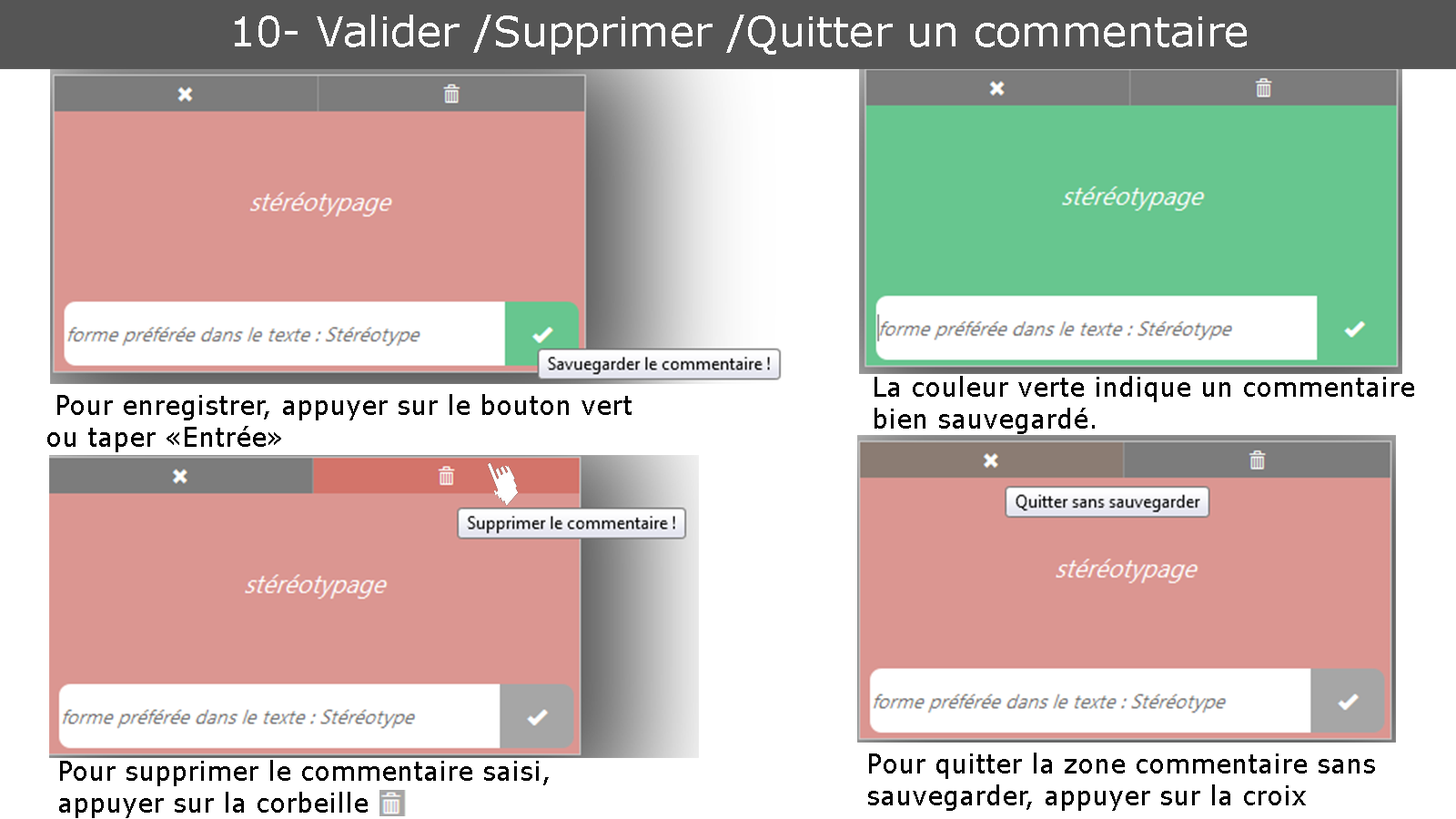
<style>
.page{position:relative;width:1456px;height:819px;background:#ffffff}
.page>*{position:absolute;margin:0}
.t1{font:41.7px "Verdana";color:#ffffff}
.t2{font:26.5px "Verdana";color:#000000}
</style>
<div class="page">
<p class="t1" style="left:235px;top:15px;width:1012px;height:40px">10- Valider /Supprimer /Quitter un commentaire</p>
<p class="t2" style="left:874px;top:376px;width:540px;height:58px">La couleur verte indique un commentaire bien sauvegardé.</p>
<p class="t2" style="left:47px;top:394px;width:585px;height:58px">Pour enregistrer, appuyer sur le bouton vert ou taper «Entrée»</p>
<p class="t2" style="left:59px;top:760px;width:490px;height:58px">Pour supprimer le commentaire saisi,  appuyer sur la corbeille</p>
<p class="t2" style="left:868px;top:753px;width:507px;height:58px">Pour quitter la zone commentaire sans sauvegarder, appuyer sur la croix</p>
</div>
